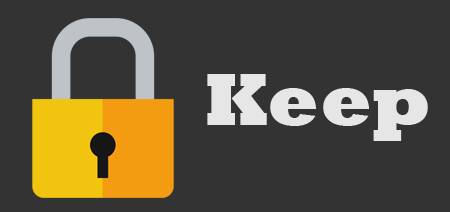
<style>
.page{position:relative;width:450px;height:212px;background:#333333}
.page>*{position:absolute;margin:0}
.t1{font:75px "Rockwell-ExtraBold";color:#e6e6e6}
</style>
<div class="page">
<p class="t1" style="left:207px;top:74px;width:221px;height:67px">Keep</p>
</div>
